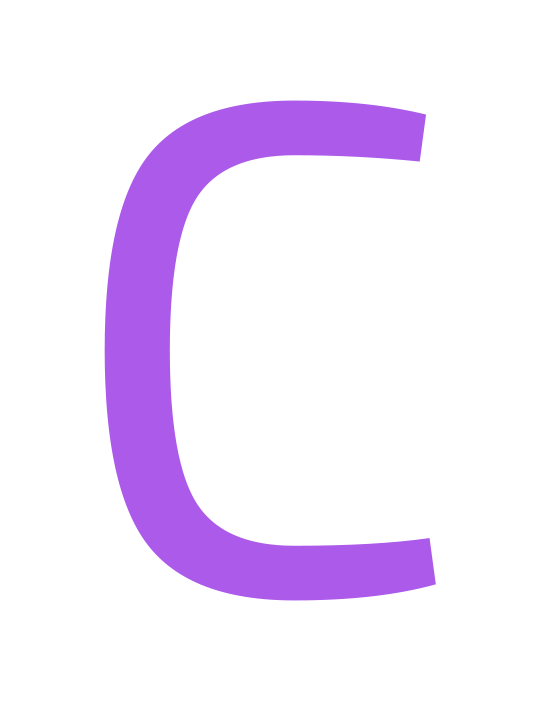
<style>
.page{position:relative;width:540px;height:702px;background:#ffffff}
.page>*{position:absolute;margin:0}
.t1{font:700px "Exo2-Regular";color:#ab5aea}
</style>
<div class="page">
<p class="t1" style="left:104px;top:100px;width:332px;height:501px">C</p>
</div>
